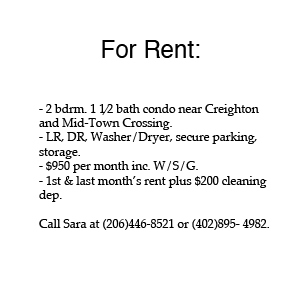
<style>
.page{position:relative;width:300px;height:300px;background:#ffffff}
.page>*{position:absolute;margin:0}
.t1{font:24px "Helvetica";color:#000000}
.t2{font:12px "Palatino-Roman";color:#000000}
</style>
<div class="page">
<p class="t1" style="left:102px;top:40px;width:98px;height:18px">For Rent:</p>
<p class="t2" style="left:39px;top:104px;width:230px;height:126px">- 2 bdrm. 1 1⁄2 bath condo near Creighton and Mid-Town Crossing. <br>- LR, DR, Washer/Dryer, secure parking, <br>storage. <br>- $950 per month inc. W/S/G. <br>- 1st &amp; last month’s rent plus $200 cleaning <br>dep. <br><br>Call Sara at (206)446-8521 or (402)895- 4982.</p>
</div>
